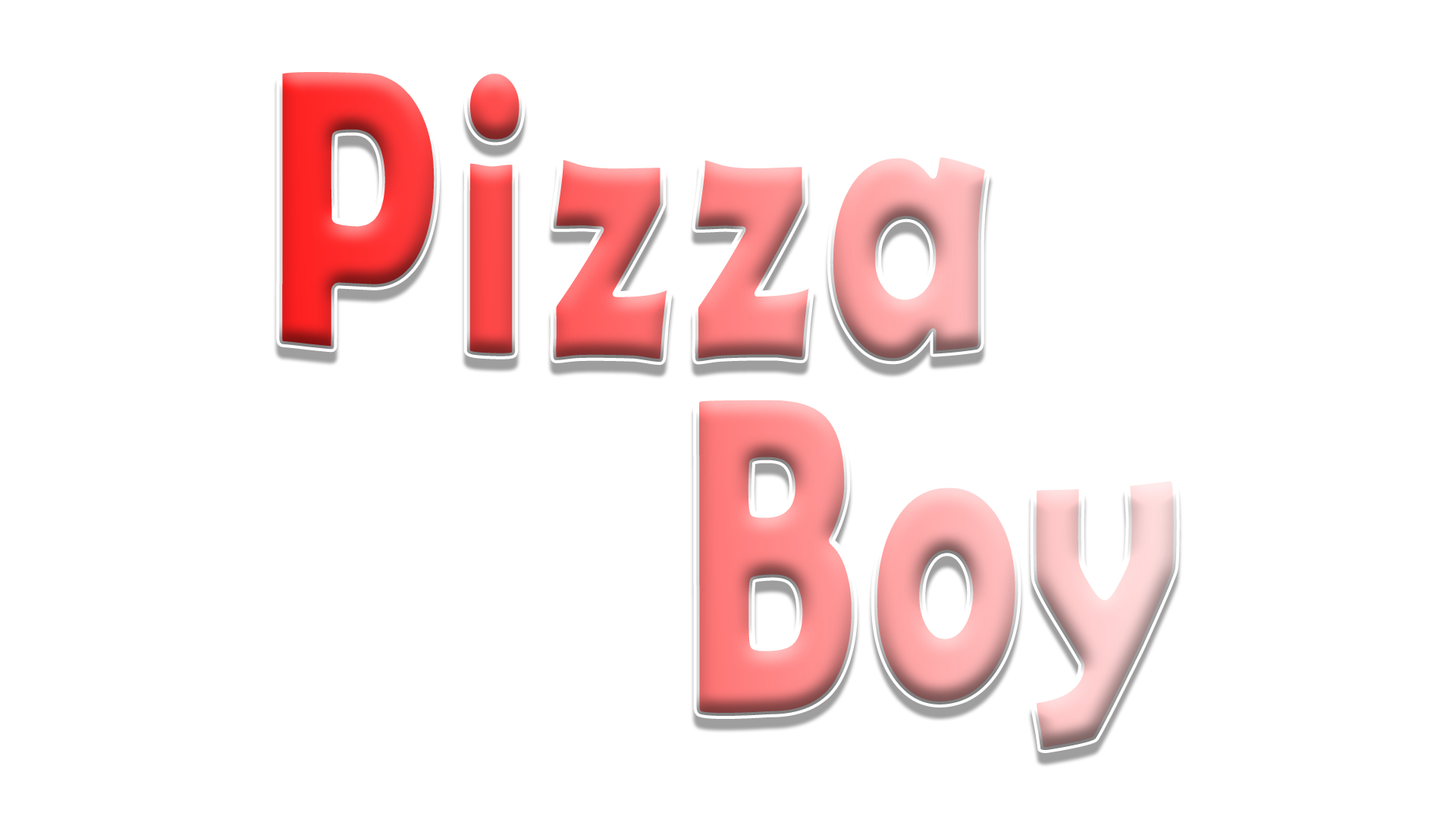
<style>
.page{position:relative;width:1456px;height:819px;background:#ffffff}
.page>*{position:absolute;margin:0}
.t1{font:399.4px "BerlinSansFBDemi-Bold";letter-spacing:0.025em;scale:0.72 1}
</style>
<div class="page">
<p class="t1" style="left:279px;top:69px;width:709px;height:293px">Pizza</p>
<p class="t1" style="left:696px;top:397px;width:481px;height:353px">Boy</p>
</div>
